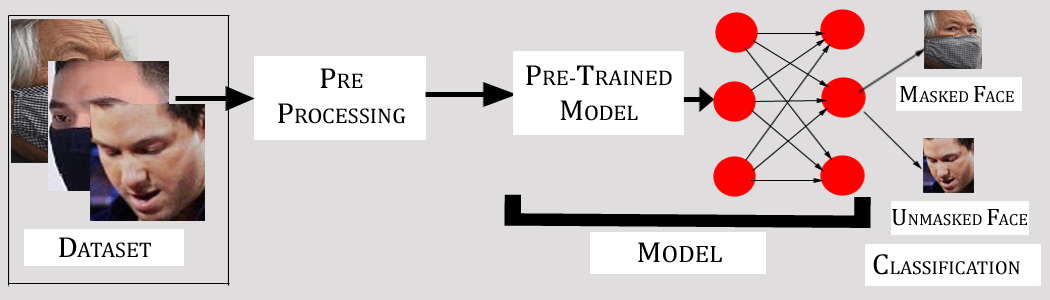
<style>
.page{position:relative;width:1050px;height:300px;background:#dfdddd}
.page>*{position:absolute;margin:0}
.t1{font:21.3px "Cambria";color:#000000;scale:1.05 1}
.t2{font:29.3px "Cambria";color:#000000;scale:1.05 1}
.t3{font:16px "Cambria";color:#000000;scale:1.05 1}
.t4{font:24px "Cambria";color:#000000;scale:1.05 1}
.t5{font:402.6px "Cambria";color:#000000;scale:0.35 1}
.t6{font:18.7px "Cambria";color:#000000;scale:1.05 1}
</style>
<div class="page">
<p class="t1" style="left:526px;top:65px;width:146px;height:56px;text-align:center"><span class="t2">P</span>RE-<span class="t2">T</span>RAINED <br><span class="t2">M</span>ODEL</p>
<p class="t1" style="left:278px;top:68px;width:128px;height:56px;text-align:center"><span class="t2">P</span>RE<br><span class="t2">P</span>ROCESSING</p>
<p class="t3" style="left:900px;top:86px;width:114px;height:17px"><span class="t4">M</span>ASKED <span class="t4">F</span>ACE</p>
<p class="t5" style="left:504px;top:194px;width:367px;height:34px;rotate:-89deg">[</p>
<p class="t3" style="left:892px;top:209px;width:135px;height:17px"><span class="t4">U</span>NMASKED <span class="t4">F</span>ACE</p>
<p class="t1" style="left:59px;top:237px;width:92px;height:21px"><span class="t2">D</span>ATASET</p>
<p class="t4" style="left:638px;top:242px;width:84px;height:21px"><span class="t2">M</span>ODEL</p>
<p class="t6" style="left:873px;top:254px;width:147px;height:21px"><span class="t2">C</span>LASSIFICATION</p>
</div>
